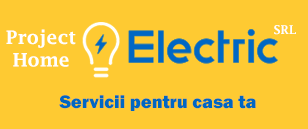
<style>
.page{position:relative;width:308px;height:129px;background:#feca32}
.page>*{position:absolute;margin:0}
.t1{font:18.7px "LucidaFax-Demi";color:#ffffff}
.t2{font:12px "LucidaFax-Demi";color:#ffffff}
.t3{font:18.7px "FranklinGothic-Heavy";color:#0067c2}
</style>
<div class="page">
<p class="t1" style="left:6px;top:29px;width:70px;height:38px;text-align:center">Project<br>Home</p>
<p class="t2" style="left:274px;top:25px;width:22px;height:10px">SRL</p>
<p class="t3" style="left:59px;top:95px;width:197px;height:16px">Servicii pentru casa ta</p>
</div>
